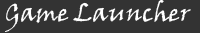
<style>
.page{position:relative;width:200px;height:33px;background:#333333}
.page>*{position:absolute;margin:0}
.t1{font:25px "VinerHandITC";color:#ffffff}
</style>
<div class="page">
<p class="t1" style="left:5px;top:0px;width:186px;height:32px">Game Launcher</p>
</div>
